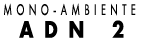
<style>
.page{position:relative;width:141px;height:40px;background:#ffffff}
.page>*{position:absolute;margin:0}
.t1{font:15.9px "FuturaPT-Book";letter-spacing:0.44em;color:#000000;scale:0.63 1}
.t2{font:21.9px "FuturaStd-Bold";letter-spacing:0.6em;color:#000000;scale:0.82 1}
</style>
<div class="page">
<p class="t1" style="left:4px;top:3px;width:132px;height:13px">MONO-AMBIENTE</p>
<p class="t2" style="left:19px;top:20px;width:105px;height:18px">ADN 2</p>
</div>
